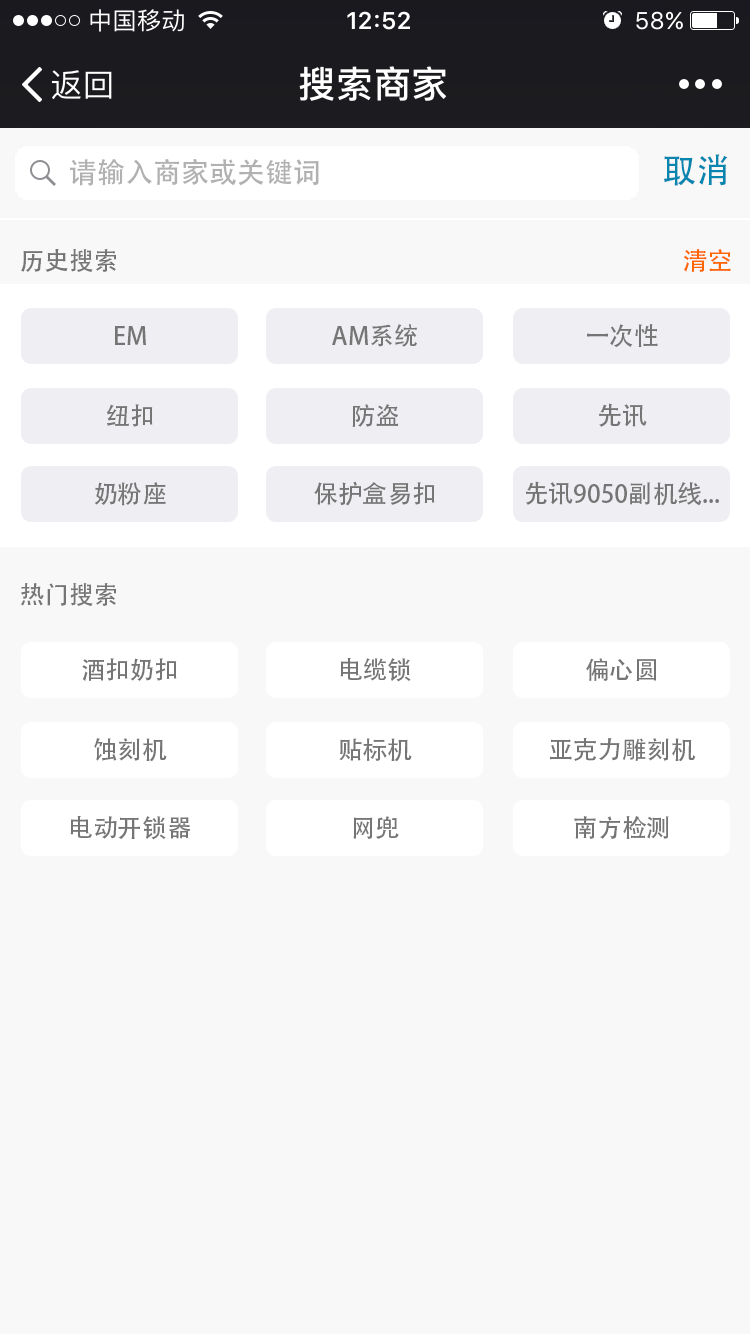
<style>
.page{position:relative;width:750px;height:1334px;background:#f8f8f8}
.page>*{position:absolute;margin:0}
.t1{font:28.4px "AdobeHeitiStd-Regular";color:#b1b1b1;text-transform:uppercase}
.t2{font:34.4px "AdobeHeitiStd-Regular";color:#0886b0;text-transform:uppercase}
.t3{font:24.9px "AdobeHeitiStd-Regular";color:#757575;text-transform:uppercase}
.t4{font:24.9px "AdobeHeitiStd-Regular";color:#ff6600;text-transform:uppercase}
.t5{font:24.9px "AdobeHeitiStd-Regular";color:#757575}
</style>
<div class="page">
<p class="t1" style="left:70px;top:159px;width:249px;height:27px">请输入商家或关键词</p>
<p class="t2" style="left:663px;top:154px;width:65px;height:32px">取消</p>
<p class="t3" style="left:21px;top:249px;width:95px;height:23px">历史搜索</p>
<p class="t4" style="left:684px;top:249px;width:47px;height:23px">清空</p>
<p class="t5" style="left:115px;top:326px;width:31px;height:19px">EM</p>
<p class="t5" style="left:332px;top:324px;width:85px;height:23px">AM系统</p>
<p class="t5" style="left:587px;top:324px;width:71px;height:24px">一次性</p>
<p class="t5" style="left:107px;top:404px;width:46px;height:23px">纽扣</p>
<p class="t5" style="left:352px;top:404px;width:47px;height:23px">防盗</p>
<p class="t5" style="left:599px;top:403px;width:48px;height:24px">先讯</p>
<p class="t5" style="left:94px;top:482px;width:72px;height:24px">奶粉座</p>
<p class="t5" style="left:314px;top:481px;width:121px;height:25px">保护盒易扣</p>
<p class="t5" style="left:526px;top:481px;width:193px;height:25px">先讯9050副机线...</p>
<p class="t3" style="left:21px;top:583px;width:95px;height:23px">热门搜索</p>
<p class="t5" style="left:82px;top:658px;width:95px;height:23px">酒扣奶扣</p>
<p class="t5" style="left:340px;top:658px;width:71px;height:24px">电缆锁</p>
<p class="t5" style="left:586px;top:658px;width:70px;height:23px">偏心圆</p>
<p class="t5" style="left:550px;top:737px;width:146px;height:25px">亚克力雕刻机</p>
<p class="t5" style="left:94px;top:738px;width:73px;height:24px">蚀刻机</p>
<p class="t5" style="left:339px;top:738px;width:73px;height:24px">贴标机</p>
<p class="t5" style="left:70px;top:816px;width:121px;height:24px">电动开锁器</p>
<p class="t5" style="left:353px;top:816px;width:46px;height:23px">网兜</p>
<p class="t5" style="left:574px;top:816px;width:95px;height:23px">南方检测</p>
</div>
